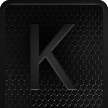
<style>
.page{position:relative;width:108px;height:108px}
.page>*{position:absolute;margin:0}
.t1{font:100px "MyriadPro-Regular";color:#222222}
</style>
<div class="page">
<p class="t1" style="left:30px;top:23px;width:48px;height:67px">K</p>
</div>
